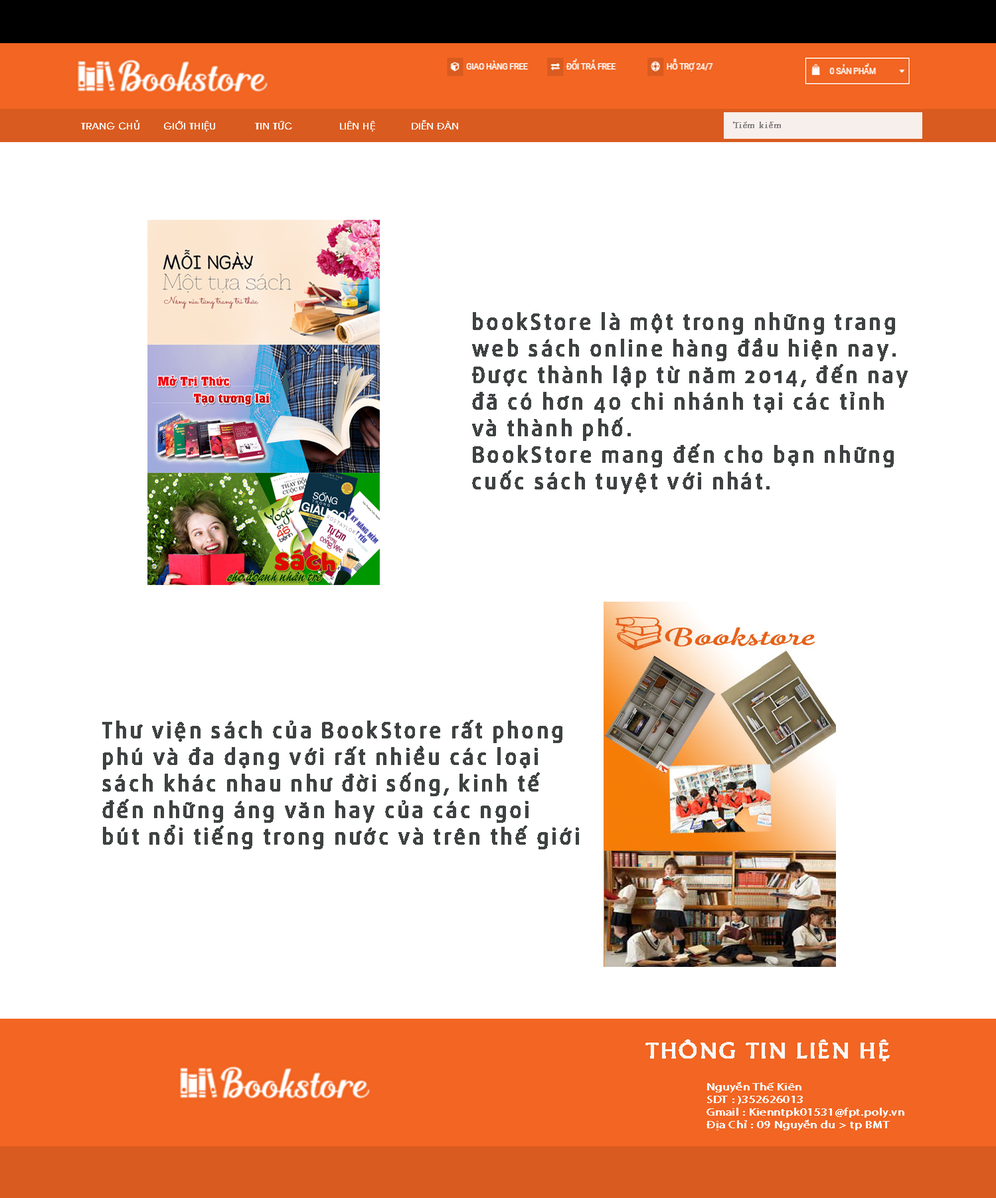
<style>
.page{position:relative;width:996px;height:1198px;background:#ffffff}
.page>*{position:absolute;margin:0}
.t1{font:9.3px "UTM-Avo";color:#f7eeea;font-weight:bold}
.t2{font:9.3px "VNI-Garam";color:#888584;font-weight:bold}
.t3{font:9.3px "MinionPro-Regular";color:#888584;font-weight:bold}
.t4{font:22.1px "UTM-Daxline-Medium";letter-spacing:0.1em;color:#3f4242;font-weight:bold}
.t5{font:22.6px "UTM-Khuccamta";letter-spacing:0.025em;color:#faf7f6;font-weight:bold;scale:1.08 1}
.t6{font:10.5px "MyriadPro-Regular";letter-spacing:0.025em;color:#faf7f6;font-weight:bold;scale:1.14 1}
</style>
<div class="page">
<p class="t1" style="left:81px;top:120px;width:58px;height:9px">TRANG CHỦ</p>
<p class="t1" style="left:164px;top:121px;width:51px;height:10px">GIỚI THIỆU</p>
<p class="t1" style="left:255px;top:121px;width:37px;height:8px">TIN TỨC</p>
<p class="t1" style="left:340px;top:121px;width:35px;height:10px">LIÊN HỆ</p>
<p class="t1" style="left:412px;top:120px;width:46px;height:9px">DIỄN ĐÀN</p>
<p class="t2" style="left:733px;top:121px;width:48px;height:7px">Ti<span class="t3">ề</span>m ki<span class="t3">ế</span>m</p>
<p class="t4" style="left:472px;top:312px;width:435px;height:182px">bookStore là một trong những trang<br>web sách online hàng đầu hiện nay.<br>Được thành lập từ năm 2014, đến nay<br>đã có hơn 40 chi nhánh tại các tỉnh <br>và thành phố.<br>BookStore mang đến cho bạn những<br>cuốc sách tuyệt với nhát.</p>
<p class="t4" style="left:102px;top:720px;width:477px;height:129px">Thư viện sách của BookStore rất phong<br>phú và đa dạng với rất nhiều các loại<br>sách khác nhau như đời sống, kinh tế <br>đến những áng văn hay của các ngoi<br>bút nổi tiếng trong nước và trên thế giới</p>
<p class="t5" style="left:645px;top:1039px;width:245px;height:22px">THÔNG TIN LIÊN HỆ</p>
<p class="t6" style="left:706px;top:1081px;width:198px;height:49px">Nguyễn Thế Kiên <br>SDT : )352626013<br>Gmail : Kienntpk01531@fpt.poly.vn<br>Địa Chỉ : 09 Nguyễn du &gt; tp BMT</p>
</div>
